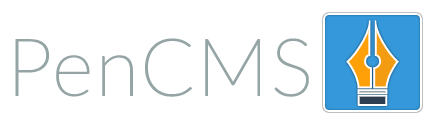
<style>
.page{position:relative;width:425px;height:125px;background:#ffffff}
.page>*{position:absolute;margin:0}
.t1{font:80px "Lato-Thin";color:#95a5a6;font-weight:bold}
</style>
<div class="page">
<p class="t1" style="left:15px;top:38px;width:294px;height:59px">PenCMS</p>
</div>
